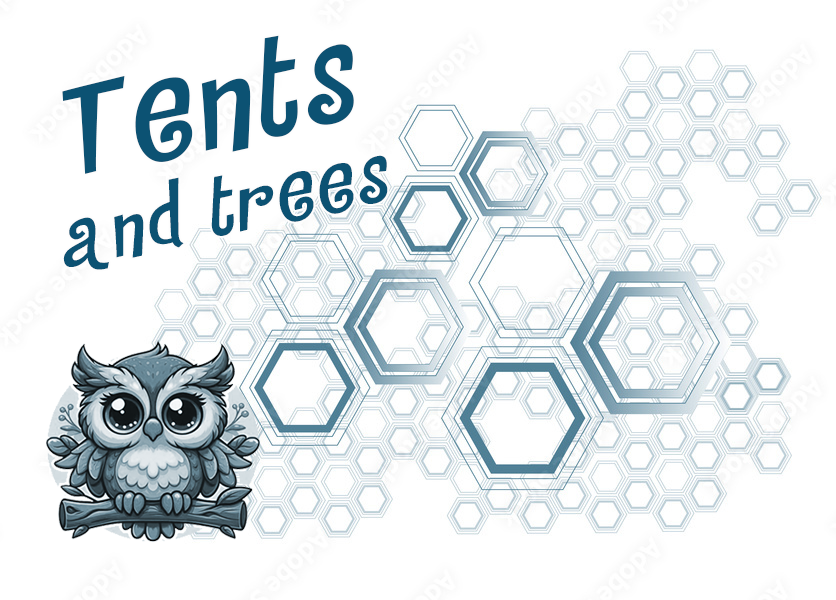
<style>
.page{position:relative;width:836px;height:600px;background:#ffffff}
.page>*{position:absolute;margin:0}
.t1{font:75px "mr_CountryhouseG";color:#0c5273;scale:1.21 1}
.t2{font:125px "mr_CountryhouseG";color:#0c5273;scale:1.21 1}
</style>
<div class="page">
<p class="t1" style="left:62px;top:35px;width:326px;height:235px;rotate:-12deg"><span class="t2">Tents<br></span>and trees</p>
</div>
